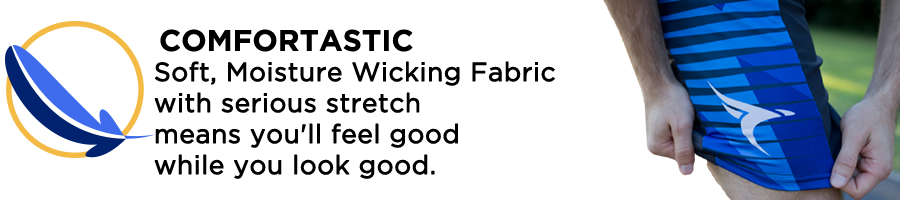
<style>
.page{position:relative;width:900px;height:200px;background:#ffffff}
.page>*{position:absolute;margin:0}
.t1{font:30px "GothamBold";color:#000000}
.t2{font:26px/31px "GothamBook";color:#000000;font-weight:bold}
</style>
<div class="page">
<p class="t1" style="left:160px;top:29px;width:253px;height:23px">COMFORTASTIC</p>
<p class="t2" style="left:154px;top:61px;width:401px;height:118px">Soft, Moisture Wicking Fabric <br>with serious stretch <br>means you'll feel good <br>while you look good.</p>
</div>
